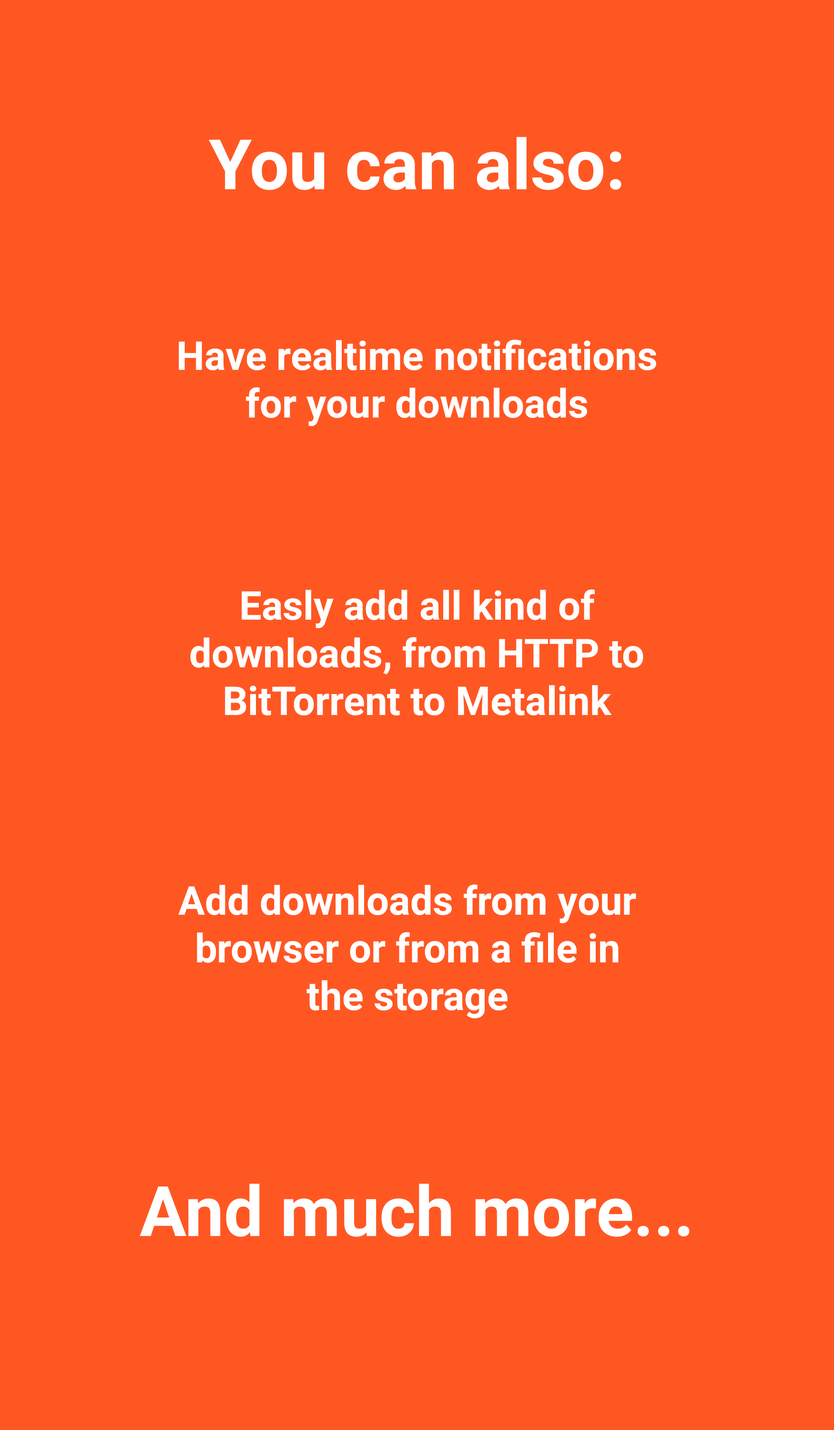
<style>
.page{position:relative;width:834px;height:1430px;background:#ff5722}
.page>*{position:absolute;margin:0}
.t1{font:69.5px "Roboto-Bold";color:#ffffff}
.t2{font:39.7px "Roboto-Bold";color:#ffffff}
</style>
<div class="page">
<p class="t1" style="left:209px;top:137px;width:412px;height:53px">You can also:</p>
<p class="t2" style="left:179px;top:339px;width:477px;height:87px;text-align:center">Have realtime notifications for your downloads</p>
<p class="t2" style="left:190px;top:589px;width:453px;height:126px;text-align:center">Easly add all kind of downloads, from HTTP to BitTorrent to Metalink</p>
<p class="t2" style="left:178px;top:884px;width:458px;height:134px;text-align:center">Add downloads from your browser or from a file in the storage</p>
<p class="t1" style="left:140px;top:1183px;width:550px;height:54px">And much more...</p>
</div>
